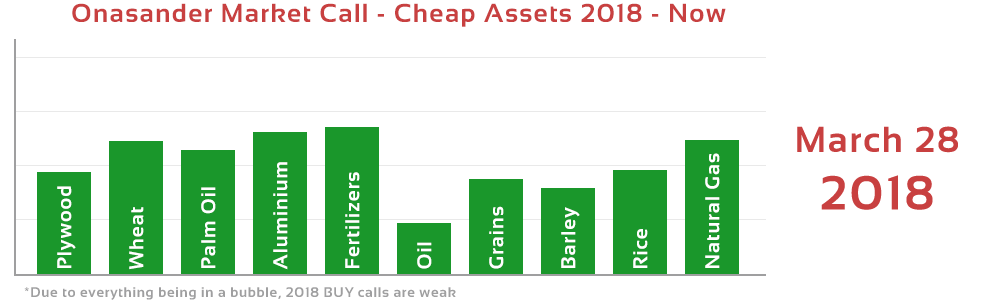
<style>
.page{position:relative;width:1000px;height:308px;background:#ffffff}
.page>*{position:absolute;margin:0}
.t1{font:26px "Sansation-Bold";letter-spacing:0.05em;color:#c84040}
.t2{font:20px "Sansation-Bold";letter-spacing:0.05em;color:#ffffff}
.t3{font:14px "Sansation-Bold";letter-spacing:0.05em;color:#9f9fa0}
</style>
<div class="page">
<p class="t1" style="left:72px;top:3px;width:654px;height:24px">Onasander Market Call - Cheap Assets 2018 - Now</p>
<p class="t2" style="left:705px;top:153px;width:15px;height:115px;rotate:-90deg">Natural Gas</p>
<p class="t2" style="left:273px;top:162px;width:15px;height:108px;rotate:-90deg">Aluminium</p>
<p class="t2" style="left:345px;top:172px;width:15px;height:96px;rotate:-90deg">Fertilizers</p>
<p class="t2" style="left:57px;top:186px;width:19px;height:82px;rotate:-90deg">Plywood</p>
<p class="t2" style="left:201px;top:187px;width:15px;height:81px;rotate:-90deg">Palm Oil</p>
<p class="t2" style="left:129px;top:207px;width:15px;height:63px;rotate:-90deg">Wheat</p>
<p class="t2" style="left:489px;top:206px;width:15px;height:63px;rotate:-90deg">Grains</p>
<p class="t2" style="left:561px;top:207px;width:19px;height:61px;rotate:-90deg">Barley</p>
<p class="t2" style="left:633px;top:229px;width:15px;height:39px;rotate:-90deg">Rice</p>
<p class="t2" style="left:417px;top:242px;width:15px;height:27px;rotate:-90deg">Oil</p>
<p class="t3" style="left:24px;top:287px;width:432px;height:13px">*Due to everything being in a bubble, 2018 BUY calls are weak</p>
</div>
